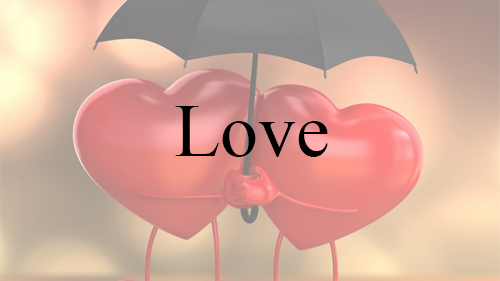
<style>
.page{position:relative;width:500px;height:281px}
.page>*{position:absolute;margin:0}
.t1{font:75.2px "TimesNewRomanPSMT";color:#000000}
</style>
<div class="page">
<p class="t1" style="left:175px;top:106px;width:153px;height:51px">Love</p>
</div>
